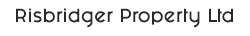
<style>
.page{position:relative;width:250px;height:36px;background:#ffffff}
.page>*{position:absolute;margin:0}
.t1{font:16px "FashionFetish";color:#2a2a2a}
</style>
<div class="page">
<p class="t1" style="left:16px;top:8px;width:217px;height:20px">Risbridger Property Ltd</p>
</div>
